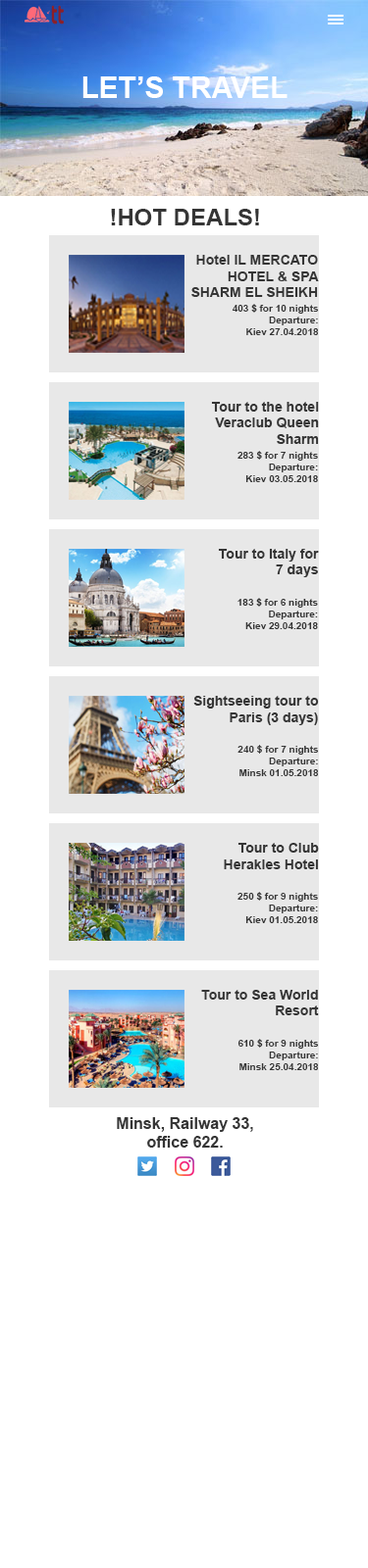
<style>
.page{position:relative;width:368px;height:1568px;background:#ffffff}
.page>*{position:absolute;margin:0}
.t1{font:29.4px "Arial-BoldMT";color:#ffffff}
.t2{font:23.5px "Arial-BoldMT";color:#353535}
.t3{font:13.7px "Arial-BoldMT";color:#353535}
.t4{font:9.8px "Arial-BoldMT";color:#353535}
.t5{font:15.7px "Arial-BoldMT";color:#353535}
</style>
<div class="page">
<p class="t1" style="left:82px;top:76px;width:205px;height:22px">LET’S TRAVEL</p>
<p class="t2" style="left:111px;top:209px;width:148px;height:16px">!HOT DEALS!</p>
<p class="t3" style="left:191px;top:255px;width:127px;height:42px;text-align:right">Hotel IL MERCATO<br>HOTEL &amp; SPA<br>SHARM EL SHEIKH</p>
<p class="t4" style="left:231px;top:304px;width:87px;height:31px;text-align:right">403 $ for 10 nights<br>Departure:<br>Kiev 27.04.2018</p>
<p class="t3" style="left:211px;top:402px;width:107px;height:42px;text-align:right">Tour to the hotel<br>Veraclub Queen<br>Sharm</p>
<p class="t4" style="left:237px;top:451px;width:81px;height:31px;text-align:right">283 $ for 7 nights<br>Departure:<br>Kiev 03.05.2018</p>
<p class="t3" style="left:218px;top:549px;width:100px;height:28px;text-align:right">Tour to Italy for<br>7 days</p>
<p class="t4" style="left:237px;top:598px;width:81px;height:31px;text-align:right">183 $ for 6 nights<br>Departure:<br>Kiev 29.04.2018</p>
<p class="t3" style="left:193px;top:696px;width:125px;height:29px;text-align:right">Sightseeing tour to<br>Paris (3 days)</p>
<p class="t4" style="left:237px;top:745px;width:81px;height:31px;text-align:right">240 $ for 7 nights<br>Departure:<br>Minsk 01.05.2018</p>
<p class="t3" style="left:223px;top:843px;width:95px;height:26px;text-align:right">Tour to Club<br>Herakles Hotel</p>
<p class="t4" style="left:237px;top:892px;width:81px;height:31px;text-align:right">250 $ for 9 nights<br>Departure:<br>Kiev 01.05.2018</p>
<p class="t3" style="left:201px;top:990px;width:117px;height:25px;text-align:right">Tour to Sea World<br>Resort</p>
<p class="t4" style="left:237px;top:1039px;width:81px;height:31px;text-align:right">610 $ for 9 nights<br>Departure:<br>Minsk 25.04.2018</p>
<p class="t5" style="left:117px;top:1117px;width:136px;height:31px;text-align:center">Minsk, Railway 33,<br>office 622.</p>
</div>
